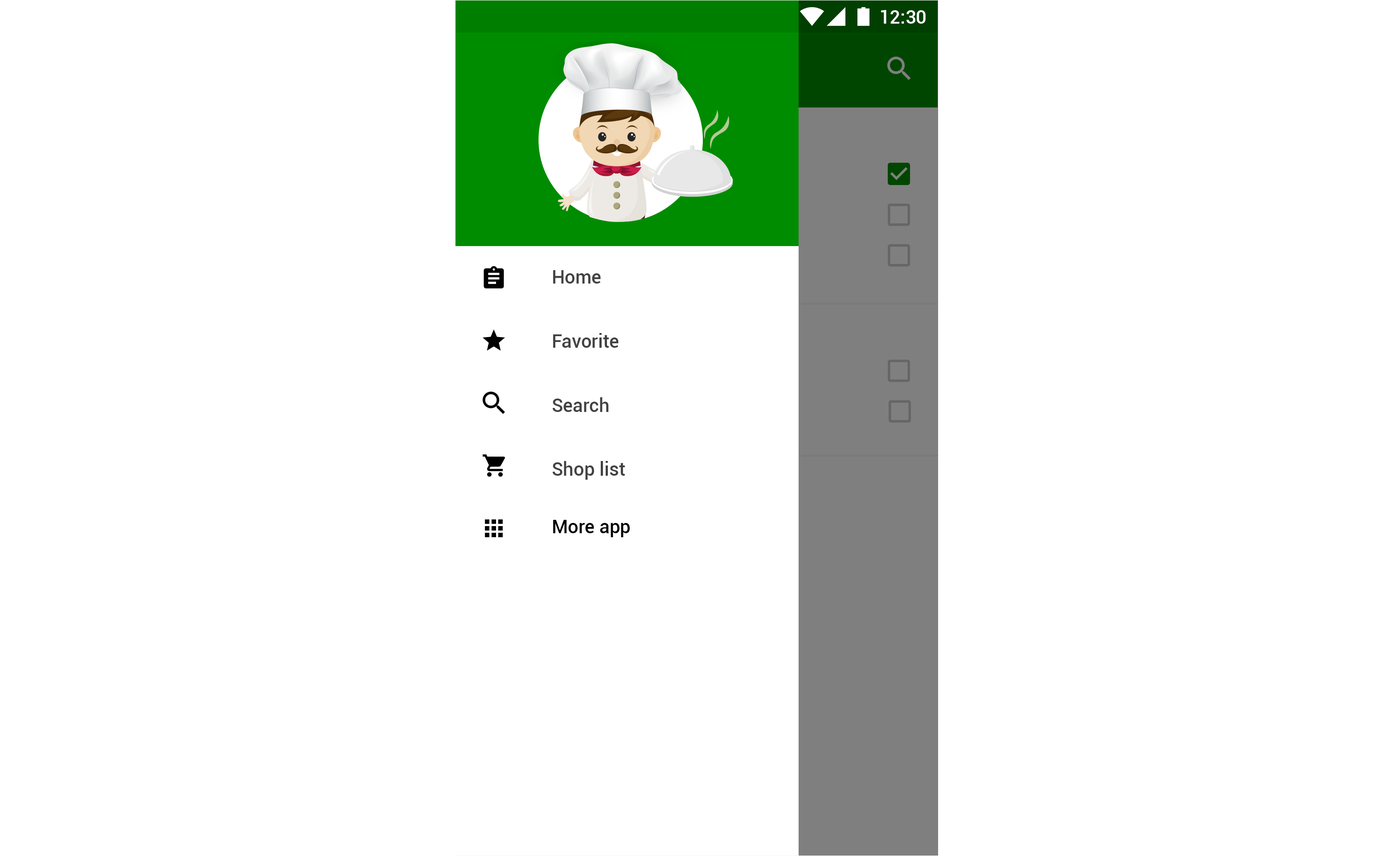
<style>
.page{position:relative;width:1394px;height:856px;background:#ffffff}
.page>*{position:absolute;margin:0}
.t1{font:18.7px "Roboto-Medium";color:#ffffff}
.t2{font:18.7px "Roboto-Medium";color:#424242}
.t3{font:18.7px "Roboto-Medium";color:#000000}
</style>
<div class="page">
<p class="t1" style="left:881px;top:10px;width:44px;height:14px">12:30</p>
<p class="t2" style="left:553px;top:270px;width:48px;height:13px">Home</p>
<p class="t2" style="left:553px;top:333px;width:65px;height:15px">Favorite</p>
<p class="t2" style="left:553px;top:397px;width:56px;height:15px">Search</p>
<p class="t2" style="left:553px;top:461px;width:72px;height:18px">Shop list</p>
<p class="t3" style="left:553px;top:520px;width:77px;height:17px">More app</p>
</div>
